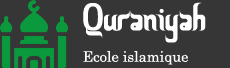
<style>
.page{position:relative;width:230px;height:68px;background:#363636}
.page>*{position:absolute;margin:0}
.t1{font:39.6px "CeriaLebaran";color:#ffffff}
.t2{font:14.5px "CenturySchoolbook";color:#ffffff}
</style>
<div class="page">
<p class="t1" style="left:83px;top:2px;width:123px;height:41px">Quraniyah</p>
<p class="t2" style="left:83px;top:51px;width:105px;height:14px">Ecole islamique</p>
</div>
